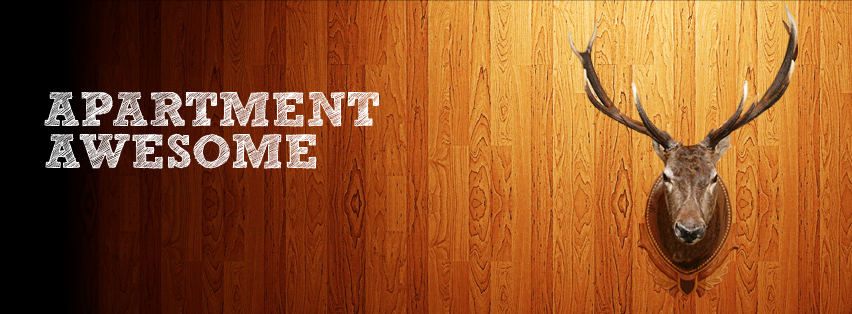
<style>
.page{position:relative;width:852px;height:314px}
.page>*{position:absolute;margin:0}
.t1{font:48px "freeversionSketchBlock-Bold";color:#ffffff;text-transform:uppercase}
</style>
<div class="page">
<p class="t1" style="left:44px;top:91px;width:335px;height:36px">apartment</p>
<p class="t1" style="left:45px;top:133px;width:272px;height:36px">awesome</p>
</div>
